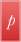
<style>
.page{position:relative;width:21px;height:42px}
.page>*{position:absolute;margin:0}
.t1{font:18px "Baskerville-Italic";color:#ffffff}
</style>
<div class="page">
<p class="t1" style="left:6px;top:15px;width:9px;height:15px">p</p>
</div>
